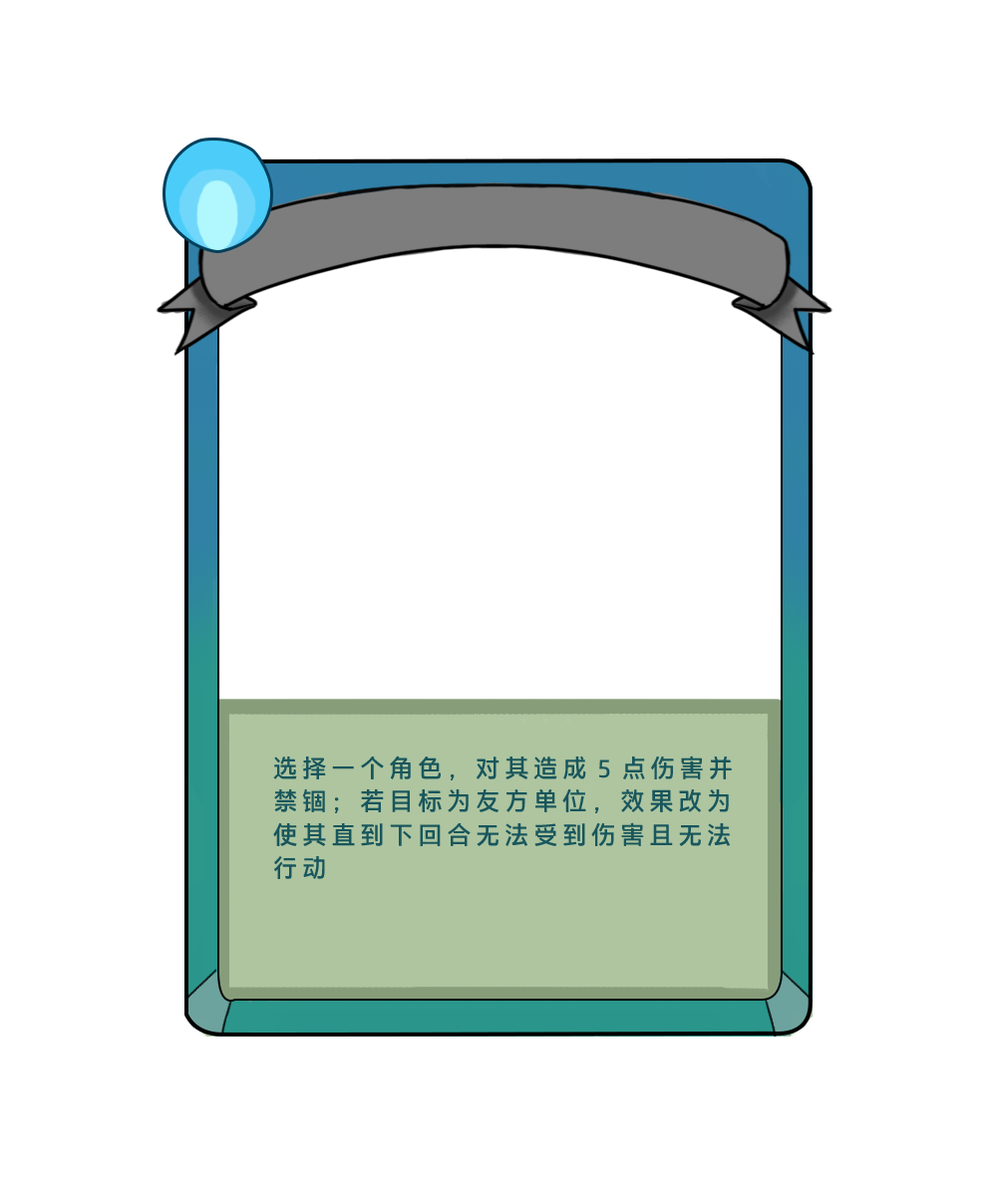
<style>
.page{position:relative;width:997px;height:1196px;background:#ffffff}
.page>*{position:absolute;margin:0}
.t1{font:24.9px/33.2px "HPSimplifiedHans-Regular";letter-spacing:0.16em;color:#18565c}
</style>
<div class="page">
<p class="t1" style="left:273px;top:756px;width:459px;height:123px">选择一个角色，对其造成5点伤害并禁锢；若目标为友方单位，效果改为使其直到下回合无法受到伤害且无法行动</p>
</div>
